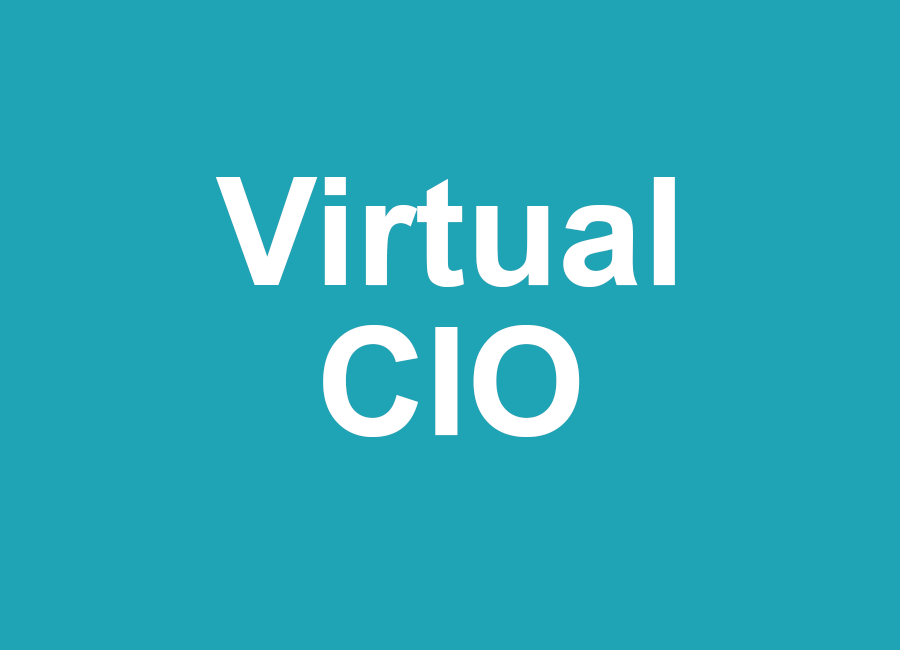
<style>
.page{position:relative;width:900px;height:650px;background:#1fa4b6}
.page>*{position:absolute;margin:0}
.t1{font:150px/150px "Arial-BoldMT";color:#ffffff}
</style>
<div class="page">
<p class="t1" style="left:215px;top:177px;width:460px;height:260px;text-align:center">Virtual<br>CIO</p>
</div>
